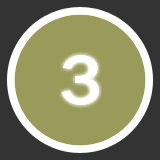
<style>
.page{position:relative;width:160px;height:160px;background:#9a9a5a}
.page>*{position:absolute;margin:0}
.t1{font:72px "FranklinGothic-Medium";color:#ffffff}
</style>
<div class="page">
<p class="t1" style="left:61px;top:55px;width:38px;height:50px">3</p>
</div>
